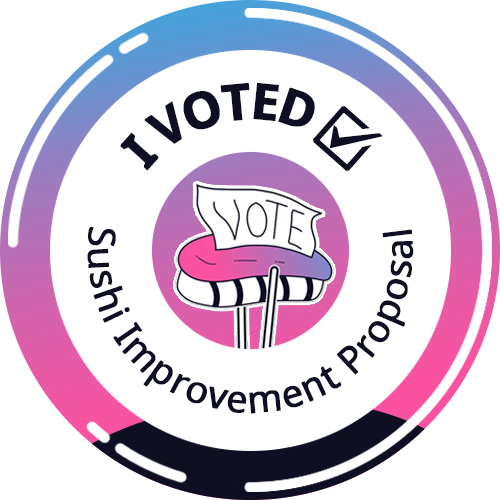
<style>
.page{position:relative;width:500px;height:500px;background:#ffffff}
.page>*{position:absolute;margin:0}
.t1{font:50px "NotoSans-Bold";letter-spacing:-0.075em;color:#0e0f23;font-weight:bold}
.t2{font:50px "EmojiOneColor";letter-spacing:-0.075em;color:#0e0f23;font-weight:bold}
.t3{font:37.5px "NotoSans";letter-spacing:0.025em;color:#0e0f23;font-weight:bold}
</style>
<div class="page">
<p class="t1" style="left:120px;top:83px;width:263px;height:88px;text-align:center">I VOTED <span class="t2">☑</span></p>
<p class="t3" style="left:87px;top:227px;width:327px;height:187px;text-align:center">Sushi Improvement Proposal</p>
</div>
